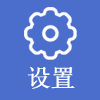
<style>
.page{position:relative;width:100px;height:100px;background:#4b6dcc}
.page>*{position:absolute;margin:0}
.t1{font:24px "NSimSun";color:#ffffff;font-weight:bold}
</style>
<div class="page">
<p class="t1" style="left:27px;top:67px;width:48px;height:22px">设置</p>
</div>
